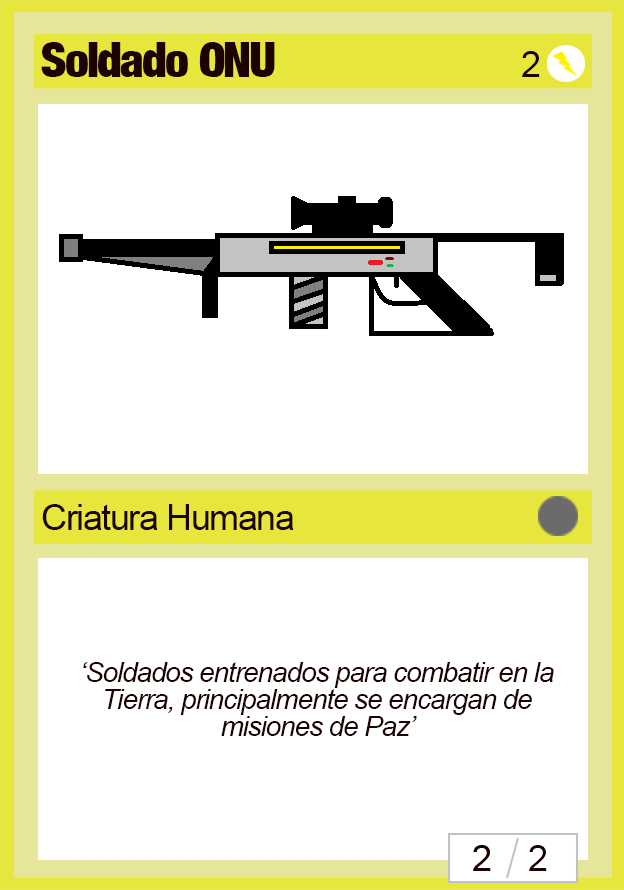
<style>
.page{position:relative;width:624px;height:890px;background:#ffffff}
.page>*{position:absolute;margin:0}
.t1{font:48px "Harvest";letter-spacing:-0.04em;color:#1d0202}
.t2{font:36px "ArialMT";letter-spacing:-0.04em;color:#1d0202}
.t3{font:28px/27px "Arial-ItalicMT";letter-spacing:-0.04em;color:#1d0202}
</style>
<div class="page">
<p class="t1" style="left:41px;top:42px;width:234px;height:35px">Soldado ONU</p>
<p class="t2" style="left:522px;top:51px;width:18px;height:26px">2</p>
<p class="t2" style="left:42px;top:504px;width:252px;height:26px">Criatura Humana</p>
<p class="t3" style="left:83px;top:662px;width:471px;height:74px;text-align:center">‘Soldados entrenados para combatir en la Tierra, principalmente se encargan de misiones de Paz’</p>
<p class="t2" style="left:529px;top:845px;width:18px;height:26px">2</p>
</div>
